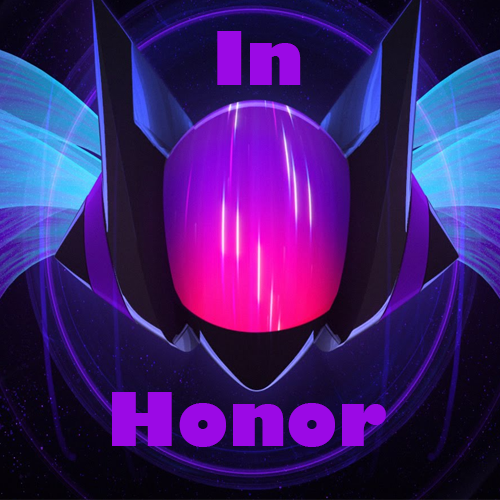
<style>
.page{position:relative;width:500px;height:500px}
.page>*{position:absolute;margin:0}
.t1{font:72px "GillSans-UltraBold";color:#9b09e5}
</style>
<div class="page">
<p class="t1" style="left:217px;top:31px;width:84px;height:54px">In</p>
<p class="t1" style="left:112px;top:392px;width:274px;height:55px">Honor</p>
</div>
